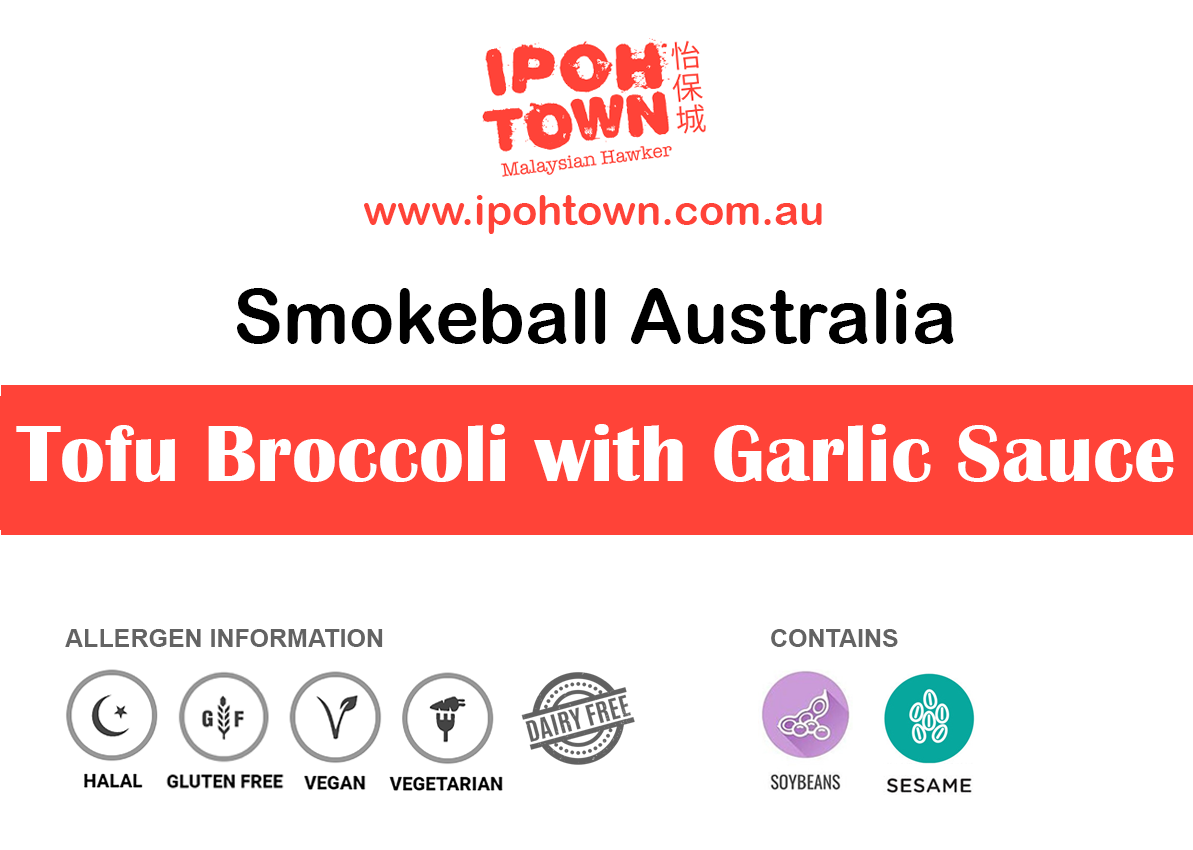
<style>
.page{position:relative;width:1193px;height:850px;background:#ffffff}
.page>*{position:absolute;margin:0}
.t1{font:41.7px "ArialRoundedMTBold";color:#ff4338}
.t2{font:75px "ArialRoundedMTBold";color:#000000}
.t3{font:83.3px "BritannicBold";color:#ffffff}
.t4{font:25px "Arial-BoldMT";color:#636363}
</style>
<div class="page">
<p class="t1" style="left:364px;top:195px;width:458px;height:39px">www.ipohtown.com.au</p>
<p class="t2" style="left:237px;top:288px;width:717px;height:56px">Smokeball Australia</p>
<p class="t3" style="left:16px;top:424px;width:1158px;height:58px">Tofu Broccoli with Garlic Sauce</p>
<p class="t4" style="left:65px;top:629px;width:318px;height:18px">ALLERGEN INFORMATION</p>
<p class="t4" style="left:771px;top:629px;width:127px;height:18px">CONTAINS</p>
</div>
